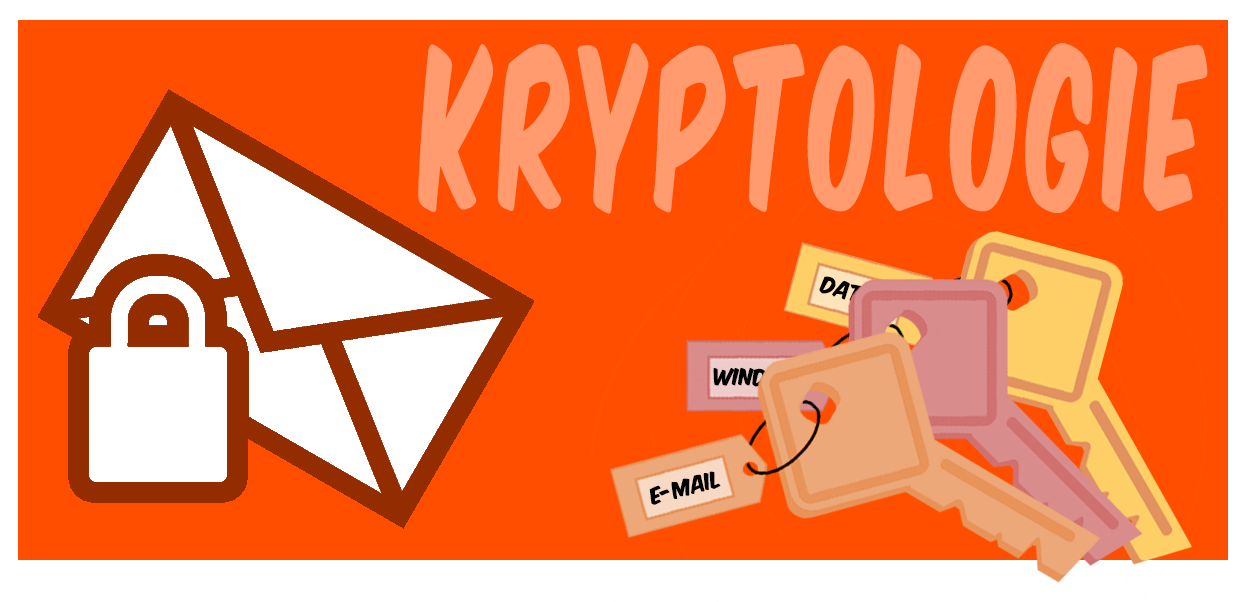
<style>
.page{position:relative;width:1240px;height:602px;background:#ff4e00}
.page>*{position:absolute;margin:0}
.t1{font:187.5px "KomikaAxis";letter-spacing:0.1em;color:#ff9b6f;scale:0.53 1}
.t2{font:20px "KomikaAxis"}
.t3{font:20px "KomikaAxis";color:#000000}
</style>
<div class="page">
<p class="t1" style="left:418px;top:43px;width:790px;height:171px">KRyptologie</p>
<p class="t2" style="left:819px;top:276px;width:87px;height:39px;rotate:17deg">Dateien</p>
<p class="t2" style="left:713px;top:367px;width:100px;height:20px;rotate:1deg">Windows</p>
<p class="t3" style="left:649px;top:471px;width:72px;height:34px;rotate:-15deg">E-Mail</p>
</div>
